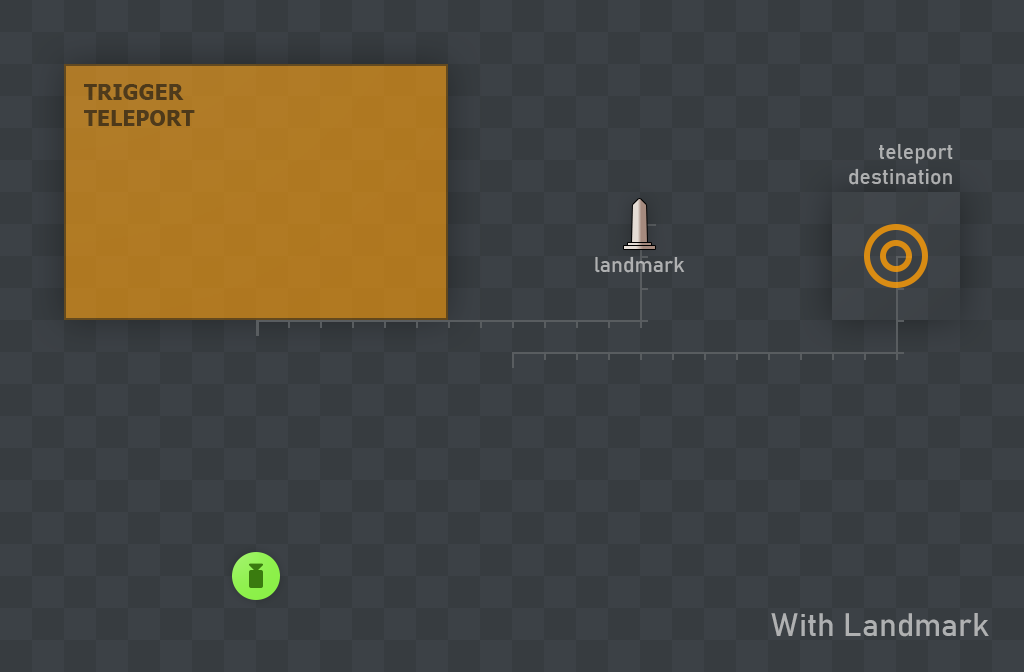
<style>
.page{position:relative;width:1024px;height:672px;background:#373c40}
.page>*{position:absolute;margin:0}
.t1{font:21.3px "Bahnschrift";color:#aeb0b1}
.t2{font:32px "Bahnschrift";color:#b0b1b2}
</style>
<div class="page">
<p class="t1" style="left:849px;top:143px;width:104px;height:42px;text-align:right">teleport<br>destination</p>
<p class="t1" style="left:595px;top:256px;width:90px;height:17px">landmark</p>
<p class="t2" style="left:771px;top:613px;width:218px;height:24px">With Landmark</p>
</div>
